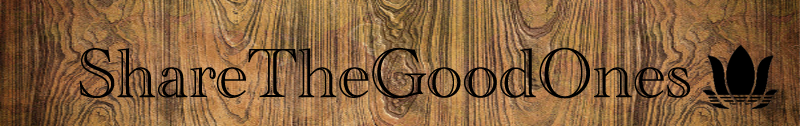
<style>
.page{position:relative;width:800px;height:126px}
.page>*{position:absolute;margin:0}
.t1{font:72px "AcademyEngravedLetPlain";color:#000000}
</style>
<div class="page">
<p class="t1" style="left:79px;top:47px;width:611px;height:52px">ShareTheGoodOnes</p>
</div>
